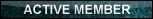
<style>
.page{position:relative;width:153px;height:19px}
.page>*{position:absolute;margin:0}
.t1{font:12.7px "Arial-BoldMT";color:#ffffff}
</style>
<div class="page">
<p class="t1" style="left:23px;top:4px;width:108px;height:10px">ACTIVE MEMBER</p>
</div>
